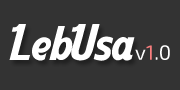
<style>
.page{position:relative;width:180px;height:90px;background:#333333}
.page>*{position:absolute;margin:0}
.t1{font:48px "AardvarkCafe";color:#ffffff}
.t2{font:20.6px "Exo2-Regular";color:#ffffff}
.t3{font:20.6px "Exo2-Regular";color:#f97e7e}
</style>
<div class="page">
<p class="t1" style="left:9px;top:24px;width:126px;height:37px">LebUsa</p>
<p class="t2" style="left:135px;top:45px;width:35px;height:15px">v<span class="t3">1</span>.0</p>
</div>
